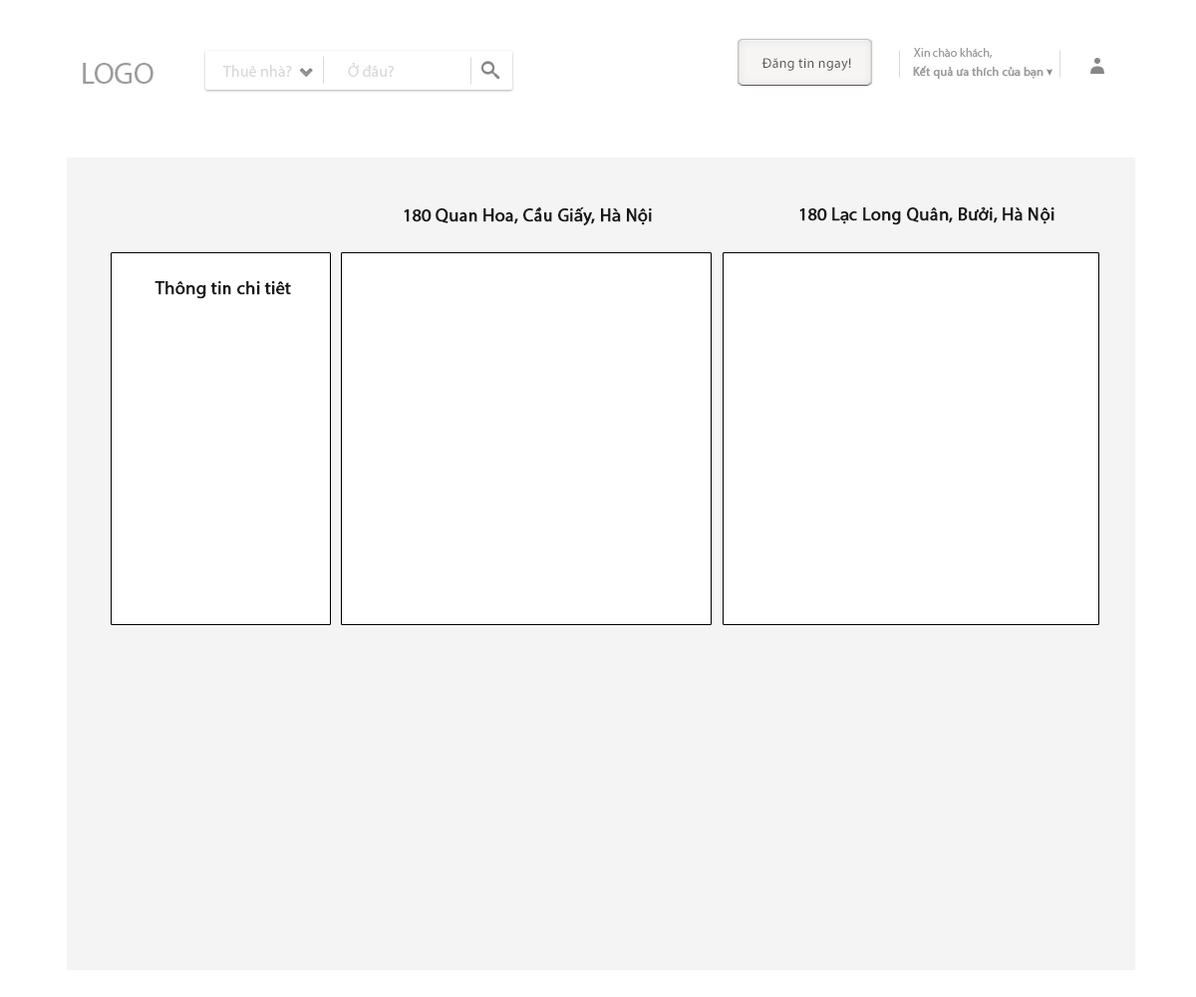
<style>
.page{position:relative;width:1196px;height:997px;background:#ffffff}
.page>*{position:absolute;margin:0}
.t1{font:12px "Tahoma";color:#9c9c9c}
.t2{font:29.9px "MyriadPro-Regular";color:#9c9c9c}
.t3{font:15.9px "MyriadPro-Regular";color:#c3c3c3}
.t4{font:14px "MyriadPro-Regular";letter-spacing:0.02em;color:#5d534d}
.t5{font:12px "MyriadPro-Regular";color:#9c9c9c;font-weight:bold}
.t6{font:17.9px "MyriadPro-Regular";color:#191818;font-weight:bold}
</style>
<div class="page">
<p class="t1" style="left:914px;top:48px;width:79px;height:11px">Xin chào khách,</p>
<p class="t2" style="left:83px;top:63px;width:71px;height:21px">LOGO</p>
<p class="t3" style="left:222px;top:65px;width:70px;height:12px;opacity:0.65">Thuê nhà?</p>
<p class="t3" style="left:348px;top:62px;width:46px;height:15px;opacity:0.65">Ở đâu?</p>
<p class="t4" style="left:762px;top:58px;width:89px;height:13px">Đăng tin ngay!</p>
<p class="t5" style="left:913px;top:66px;width:131px;height:14px">Kết quả ưa thích của bạn</p>
<p class="t6" style="left:404px;top:207px;width:248px;height:19px">180 Quan Hoa, Cầu Giấy, Hà Nội</p>
<p class="t6" style="left:799px;top:206px;width:256px;height:19px">180 Lạc Long Quân, Bưởi, Hà Nội</p>
<p class="t6" style="left:155px;top:281px;width:136px;height:18px">Thông tin chi tiêt</p>
</div>
